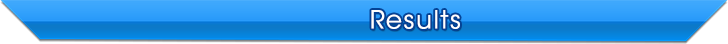
<style>
.page{position:relative;width:728px;height:44px}
.page>*{position:absolute;margin:0}
.t1{font:25px "ITCAvantGardeStd-Bk";letter-spacing:0.06em;color:#ffffff}
</style>
<div class="page">
<p class="t1" style="left:371px;top:10px;width:89px;height:19px">Results</p>
</div>
